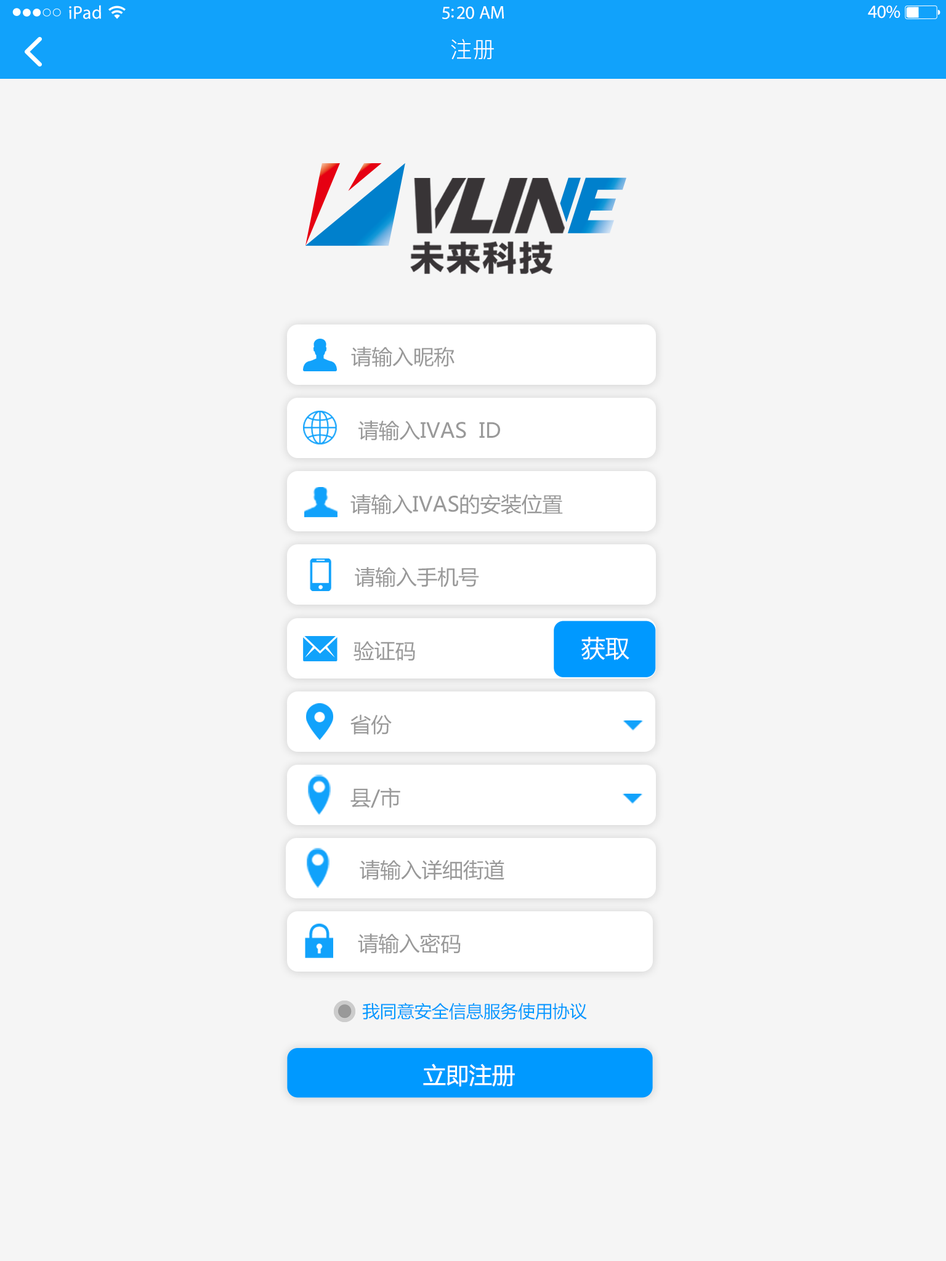
<style>
.page{position:relative;width:946px;height:1261px;background:#f5f5f5}
.page>*{position:absolute;margin:0}
.t1{font:18.5px "MyriadPro-Regular";letter-spacing:0.02em;color:#ffffff}
.t2{font:18.5px "MyriadPro-Regular";letter-spacing:-0.02em;color:#ffffff}
.t3{font:22.2px "PingFang-SC-Regular";letter-spacing:0.03em;color:#ffffff}
.t4{font:20.7px "MicrosoftYaHei";color:#999999}
.t5{font:23.9px "MicrosoftYaHei";color:#ffffff}
.t6{font:17.2px "MicrosoftYaHei";color:#0099ff}
.t7{font:23px "MicrosoftYaHei";color:#ffffff}
</style>
<div class="page">
<p class="t1" style="left:69px;top:5px;width:32px;height:14px">iPad</p>
<p class="t2" style="left:867px;top:6px;width:33px;height:12px">40%</p>
<p class="t2" style="left:442px;top:6px;width:62px;height:13px">5:20 AM</p>
<p class="t3" style="left:451px;top:39px;width:43px;height:21px">注册</p>
<p class="t4" style="left:351px;top:347px;width:103px;height:20px">请输入昵称</p>
<p class="t4" style="left:358px;top:421px;width:142px;height:20px">请输入IVAS  ID</p>
<p class="t4" style="left:350px;top:494px;width:213px;height:21px">请输入IVAS的安装位置</p>
<p class="t4" style="left:355px;top:567px;width:124px;height:20px">请输入手机号</p>
<p class="t4" style="left:353px;top:641px;width:62px;height:20px">验证码</p>
<p class="t5" style="left:581px;top:637px;width:48px;height:23px">获取</p>
<p class="t4" style="left:350px;top:714px;width:42px;height:21px">省份</p>
<p class="t4" style="left:350px;top:787px;width:50px;height:21px">县/市</p>
<p class="t4" style="left:360px;top:859px;width:144px;height:21px">请输入详细街道</p>
<p class="t4" style="left:358px;top:933px;width:103px;height:21px">请输入密码</p>
<p class="t6" style="left:362px;top:1002px;width:225px;height:18px">我同意安全信息服务使用协议</p>
<p class="t7" style="left:423px;top:1063px;width:92px;height:24px">立即注册</p>
</div>
